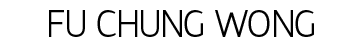
<style>
.page{position:relative;width:355px;height:45px;background:#ffffff}
.page>*{position:absolute;margin:0}
.t1{font:37.5px "HattoriHanzo-Light";color:#000000}
</style>
<div class="page">
<p class="t1" style="left:49px;top:10px;width:265px;height:27px">FU CHUNG WONG</p>
</div>
